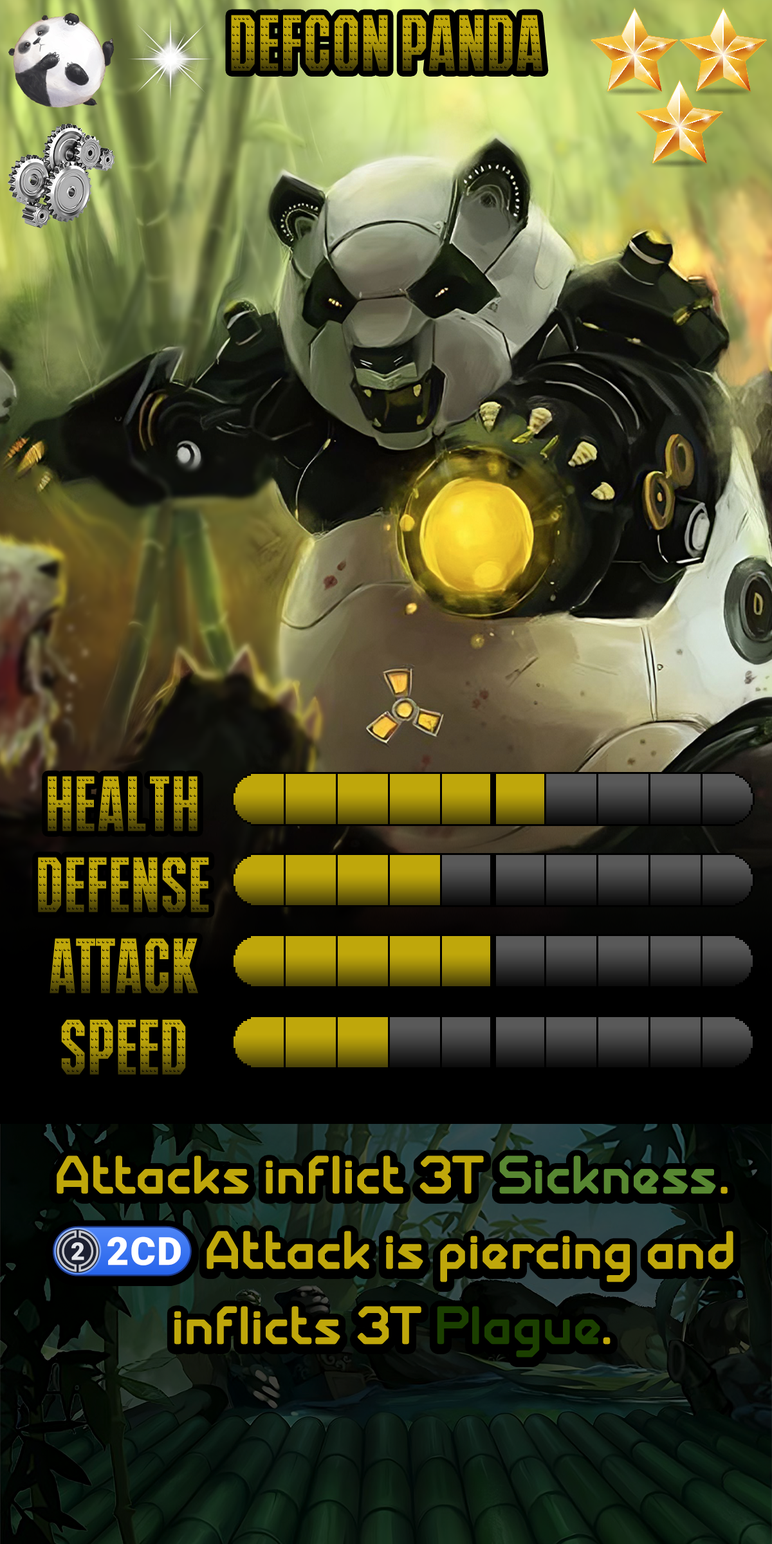
<style>
.page{position:relative;width:772px;height:1544px}
.page>*{position:absolute;margin:0}
.t1{font:131.3px "IRONMANOFWAR001BNCV"}
.t2{font:128.7px "IRONMANOFWAR001BNCV"}
.t3{font:87.5px/75.3px "GiantRobotArmy-Medium";color:#bfa70b}
.t4{font:87.5px/75.3px "GiantRobotArmy-Medium";color:#588732}
.t5{font:87.5px/75.3px "stoogedings-Regular";color:#bfa70b}
.t6{font:87.5px/75.3px "GiantRobotArmy-Medium";color:#1b3f00}
</style>
<div class="page">
<p class="t1" style="left:231px;top:15px;width:312px;height:56px">Defcon Panda</p>
<p class="t2" style="left:48px;top:776px;width:150px;height:55px">Health</p>
<p class="t2" style="left:38px;top:857px;width:171px;height:55px">Defense</p>
<p class="t2" style="left:50px;top:938px;width:148px;height:56px">Attack</p>
<p class="t2" style="left:61px;top:1020px;width:125px;height:55px">Speed</p>
<p class="t3" style="left:52px;top:1156px;width:682px;height:202px;text-align:center">Attacks inflict 3T <span class="t4">Sickness</span>.<br><span class="t5">(2CD)</span> Attack is piercing and inflicts 3T <span class="t6">Plague</span>.</p>
</div>
